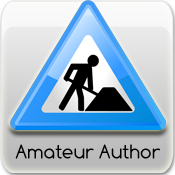
<style>
.page{position:relative;width:175px;height:175px}
.page>*{position:absolute;margin:0}
.t1{font:20px "Comfortaa";color:#000000}
</style>
<div class="page">
<p class="t1" style="left:15px;top:144px;width:145px;height:15px">Amateur Author</p>
</div>
